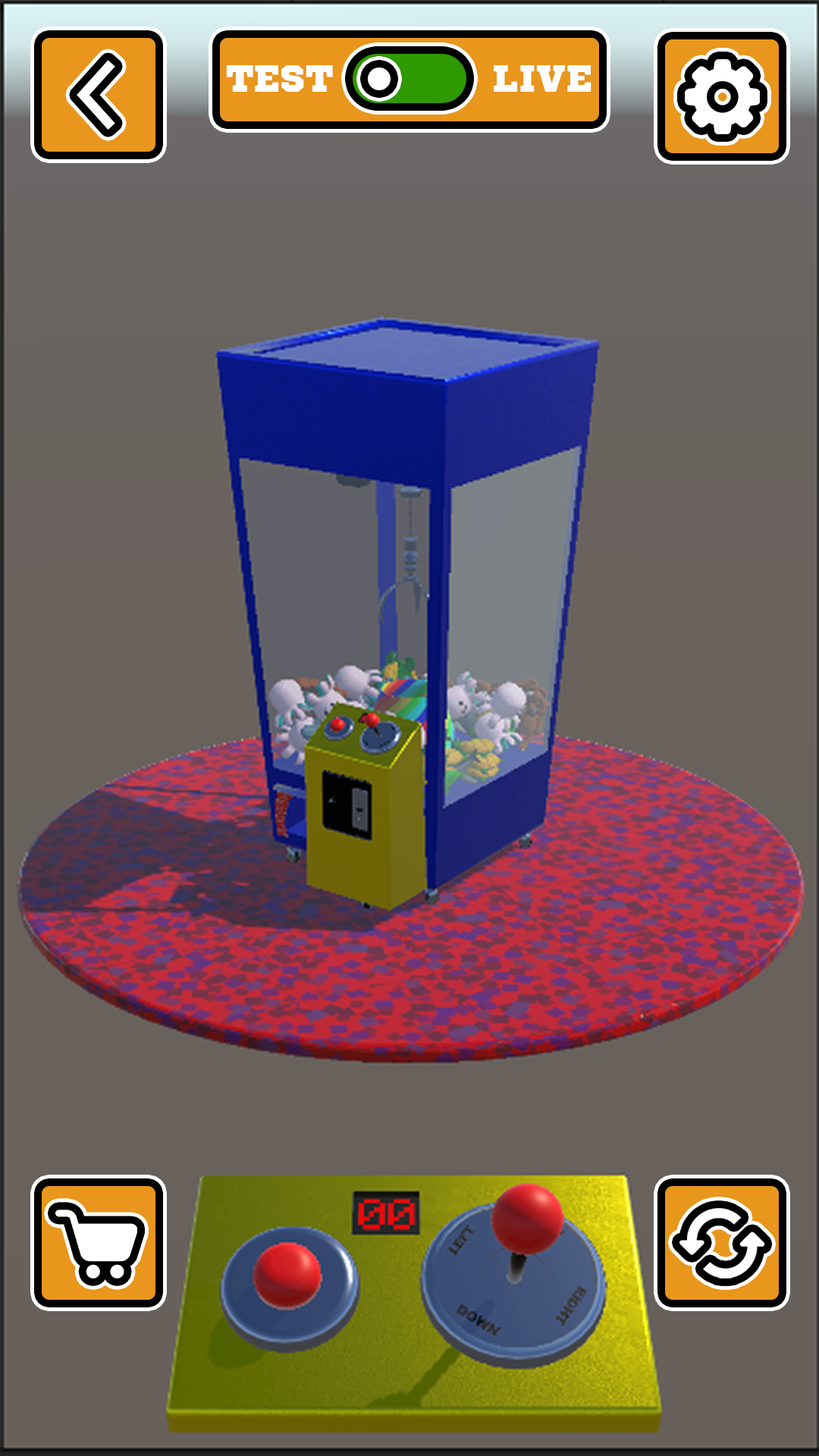
<style>
.page{position:relative;width:819px;height:1456px}
.page>*{position:absolute;margin:0}
.t1{font:37.9px "SportsWorld";color:#ffffff;text-transform:uppercase}
</style>
<div class="page">
<p class="t1" style="left:226px;top:65px;width:107px;height:27px">test</p>
<p class="t1" style="left:494px;top:65px;width:97px;height:27px">live</p>
</div>
